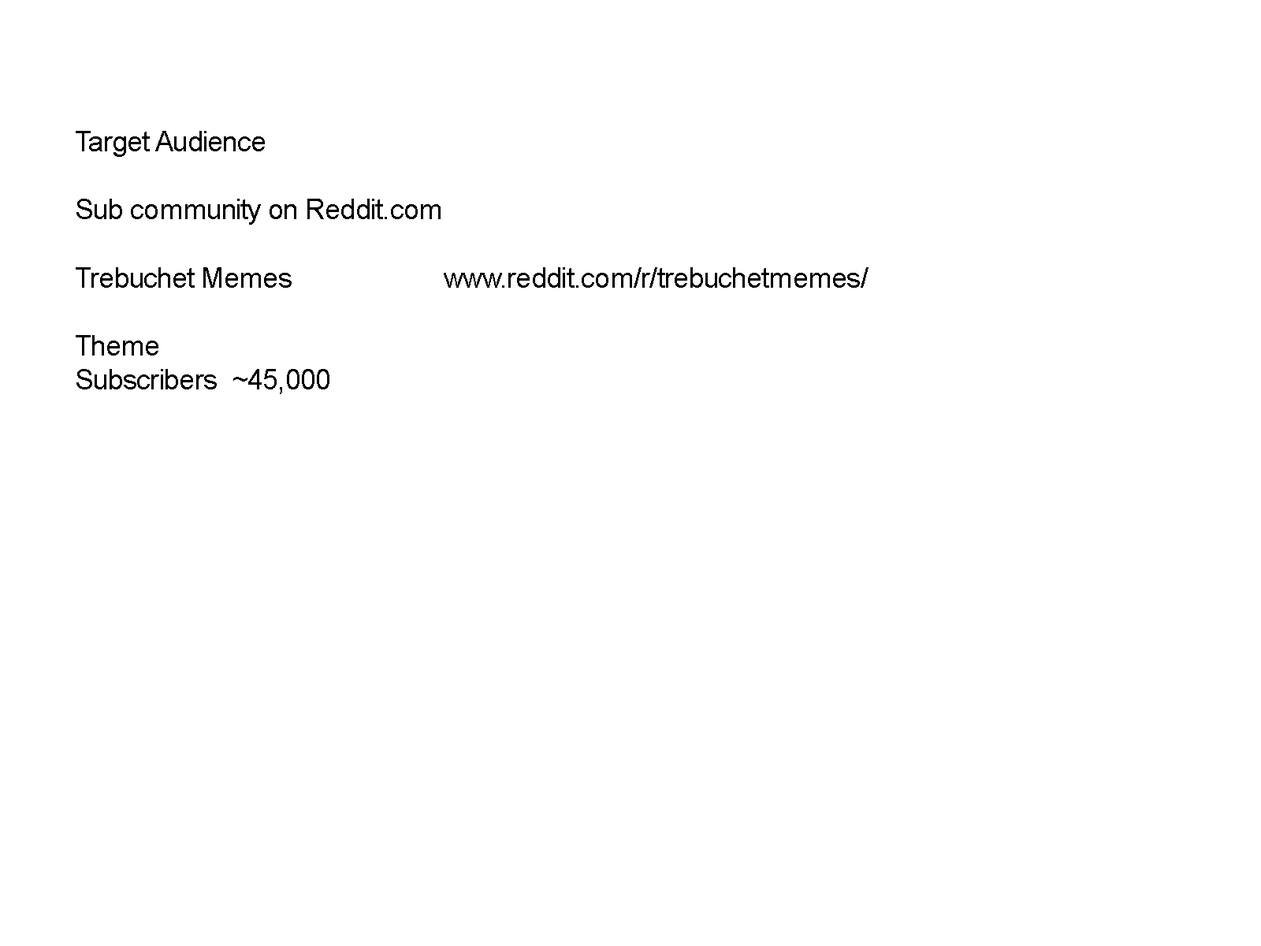
<style>
.page{position:relative;width:1261px;height:946px;background:#ffffff}
.page>*{position:absolute;margin:0}
.t1{font:28.4px "ArialMT";letter-spacing:-0.02em;color:#000000}
</style>
<div class="page">
<p class="t1" style="left:76px;top:131px;width:792px;height:263px">Target Audience<br><br>Sub community on Reddit.com<br><br>Trebuchet Memes       www.reddit.com/r/trebuchetmemes/<br><br>Theme<br>Subscribers  ~45,000</p>
</div>
